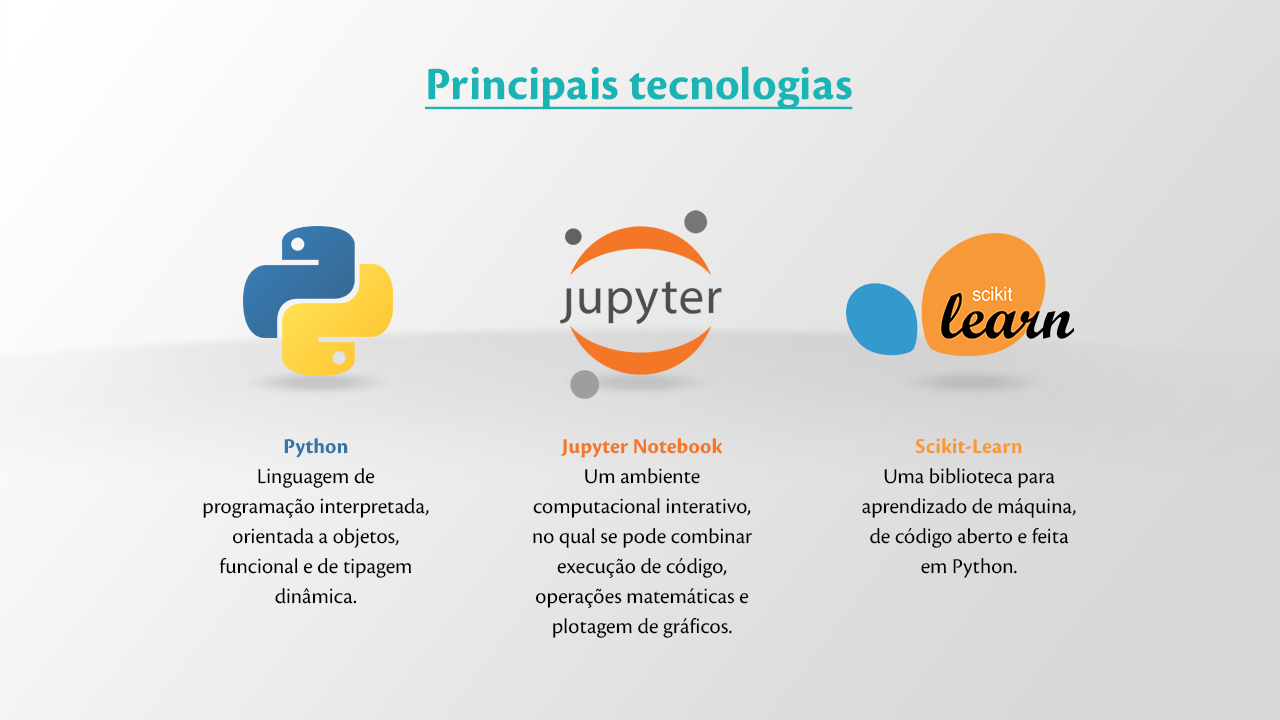
<style>
.page{position:relative;width:1280px;height:720px}
.page>*{position:absolute;margin:0}
.t1{font:48px "CronosPro-Bold";color:#1ab4b4;text-decoration:underline}
.t2{font:22px/30px "CronosPro-Regular";color:#000000}
.t3{font:22px/30px "CronosPro-Bold";color:#3775a9}
.t4{font:22px/30px "CronosPro-Bold";color:#f37726}
.t5{font:22px/30px "CronosPro-Bold";color:#f89939}
</style>
<div class="page">
<p class="t1" style="left:424px;top:66px;width:429px;height:44px">Principais tecnologias</p>
<p class="t2" style="left:203px;top:438px;width:226px;height:166px;text-align:center"><span class="t3">Python</span><br>Linguagem de programação interpretada, orientada a objetos, funcional e de tipagem dinâmica.</p>
<p class="t2" style="left:533px;top:438px;width:219px;height:200px;text-align:center"><span class="t4">Jupyter Notebook</span> <br>Um ambiente computacional interativo, no qual se pode combinar execução de código, operações matemáticas e plotagem de gráficos.</p>
<p class="t2" style="left:862px;top:438px;width:214px;height:140px;text-align:center"><span class="t5">Scikit-Learn<br></span>Uma biblioteca para aprendizado de máquina, de código aberto e feita em Python.</p>
</div>
